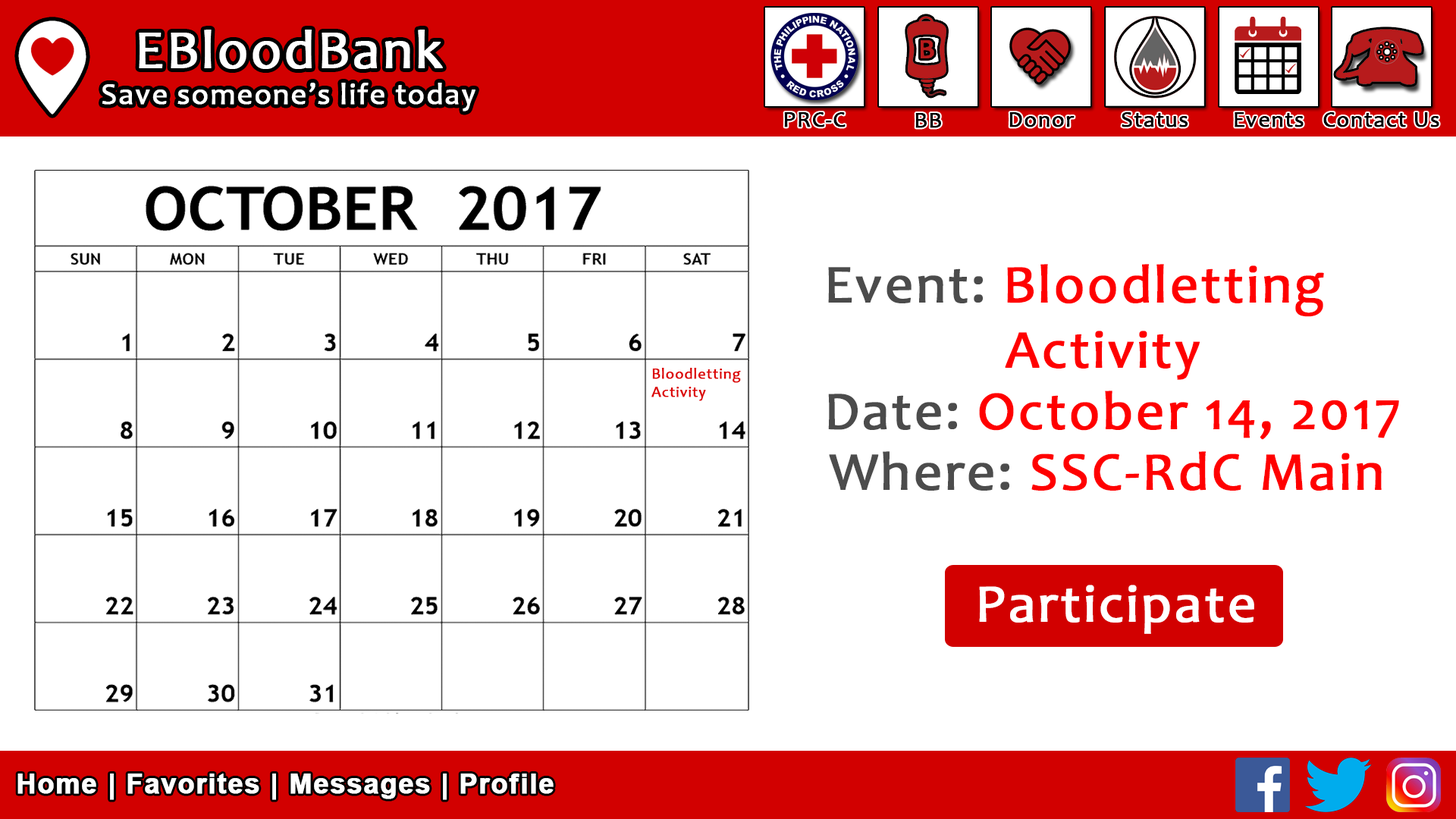
<style>
.page{position:relative;width:1456px;height:819px;background:#ffffff}
.page>*{position:absolute;margin:0}
.t1{font:30.3px "Candara";letter-spacing:0.03em;color:#ffffff;font-weight:bold}
.t2{font:54.6px "Candara";letter-spacing:0.03em;color:#ffffff;font-weight:bold}
.t3{font:22.7px "Candara";letter-spacing:0.03em;color:#000000;font-weight:bold}
.t4{font:54.6px "Candara";letter-spacing:0.03em;color:#ff0000;font-weight:bold}
.t5{font:54.6px "Candara";letter-spacing:0.03em;color:#4b4b4b;font-weight:bold}
.t6{font:15.2px "Candara";letter-spacing:0.03em;color:#dc0000;font-weight:bold}
.t7{font:54.6px "Candara";letter-spacing:0.03em;color:#4c4c4c;font-weight:bold}
.t8{font:54.3px "Candara";letter-spacing:0.03em;color:#ffffff;font-weight:bold}
.t9{font:27.3px "Arial-BoldMT";letter-spacing:0.03em;color:#ffffff;font-weight:bold}
</style>
<div class="page">
<p class="t1" style="left:102px;top:30px;width:373px;height:81px;text-align:center"><span class="t2">EBloodBank<br></span>Save someone’s life today</p>
<p class="t3" style="left:784px;top:112px;width:62px;height:15px">PRC-C</p>
<p class="t3" style="left:915px;top:113px;width:26px;height:15px">BB</p>
<p class="t3" style="left:1009px;top:112px;width:66px;height:15px">Donor</p>
<p class="t3" style="left:1122px;top:112px;width:66px;height:15px">Status</p>
<p class="t3" style="left:1235px;top:112px;width:69px;height:15px">Events</p>
<p class="t3" style="left:1323px;top:112px;width:116px;height:15px">Contact Us</p>
<p class="t4" style="left:828px;top:264px;width:496px;height:116px"><span class="t5">Event: </span>Bloodletting <br>        Activity</p>
<p class="t6" style="left:651px;top:368px;width:90px;height:33px">Bloodletting<br>Activity</p>
<p class="t4" style="left:828px;top:391px;width:571px;height:49px"><span class="t5">Date: </span>October 14, 2017</p>
<p class="t4" style="left:829px;top:451px;width:553px;height:40px"><span class="t7">Where: </span>SSC-RdC Main</p>
<p class="t8" style="left:979px;top:585px;width:275px;height:49px">Participate</p>
<p class="t9" style="left:17px;top:773px;width:537px;height:27px">Home | Favorites | Messages | Profile</p>
</div>
